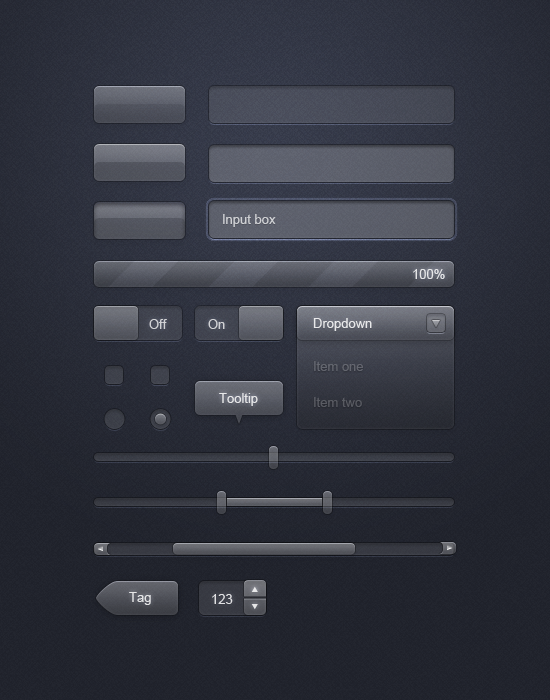
<style>
.page{position:relative;width:550px;height:700px}
.page>*{position:absolute;margin:0}
.t1{font:13px "ArialMT";color:#cfd0d3}
.t2{font:13px "ArialMT";color:#e6e6e8}
.t3{font:13px "ArialMT";color:#ffffff}
.t4{font:13px "ArialMT";color:#d1d1d5}
.t5{font:13px "ArialMT";color:#d1d2d5}
.t6{font:13px/36px "ArialMT";color:#61636c}
.t7{font:13px "ArialMT";color:#e7e7e8}
.t8{font:13px "ArialMT";color:#e5e5e6}
.t9{font:13px "ArialMT";color:#e1e1e3}
</style>
<div class="page">
<p class="t1" style="left:223px;top:214px;width:53px;height:13px">Input box</p>
<p class="t2" style="left:413px;top:269px;width:32px;height:10px">100%</p>
<p class="t3" style="left:313px;top:318px;width:59px;height:13px">Dropdown</p>
<p class="t4" style="left:149px;top:319px;width:18px;height:10px">Off</p>
<p class="t5" style="left:208px;top:319px;width:17px;height:10px">On</p>
<p class="t6" style="left:314px;top:361px;width:49px;height:46px">Item one<br>Item two</p>
<p class="t7" style="left:219px;top:393px;width:39px;height:13px">Tooltip</p>
<p class="t8" style="left:129px;top:592px;width:22px;height:13px">Tag</p>
<p class="t9" style="left:212px;top:594px;width:21px;height:10px">123</p>
</div>
